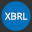
<style>
.page{position:relative;width:32px;height:32px;background:#0072bc}
.page>*{position:absolute;margin:0}
.t1{font:9.6px "OpenSans";color:#ffffff}
</style>
<div class="page">
<p class="t1" style="left:5px;top:12px;width:23px;height:8px">XBRL</p>
</div>
